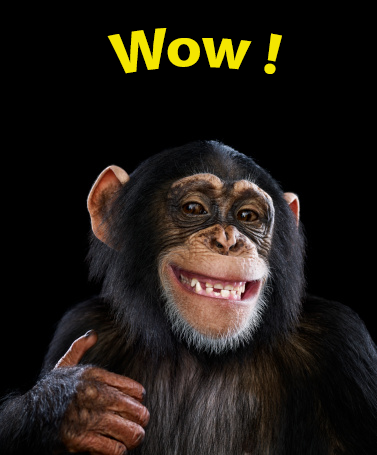
<style>
.page{position:relative;width:377px;height:455px;background:#000000}
.page>*{position:absolute;margin:0}
.t1{font:57.6px "MyriadPro-Bold";color:#f4e600}
</style>
<div class="page">
<p class="t1" style="left:107px;top:28px;width:175px;height:46px">Wow !</p>
</div>
